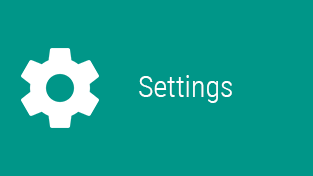
<style>
.page{position:relative;width:313px;height:176px;background:#009688}
.page>*{position:absolute;margin:0}
.t1{font:30px "RobotoCondensed-Light";color:#ffffff}
</style>
<div class="page">
<p class="t1" style="left:139px;top:75px;width:93px;height:28px">Settings</p>
</div>
